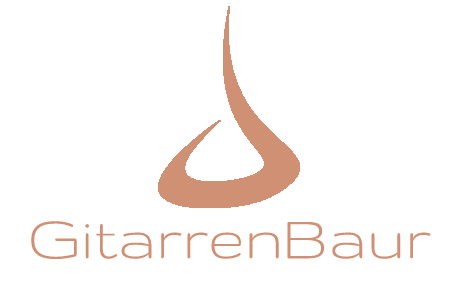
<style>
.page{position:relative;width:458px;height:286px;background:#ffffff}
.page>*{position:absolute;margin:0}
.t1{font:66.7px "Gruppo";color:#cf9073}
</style>
<div class="page">
<p class="t1" style="left:31px;top:221px;width:400px;height:38px">GitarrenBaur</p>
</div>
